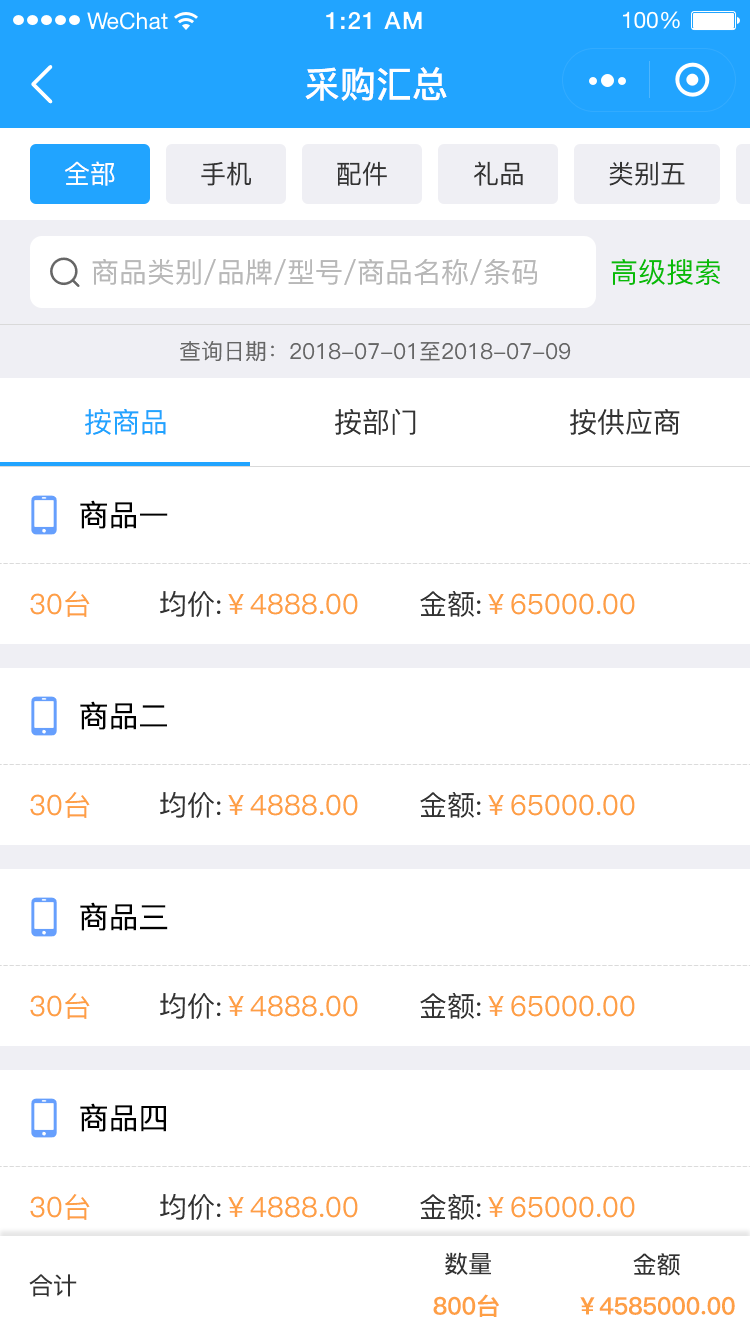
<style>
.page{position:relative;width:750px;height:1334px;background:#ffffff}
.page>*{position:absolute;margin:0}
.t1{font:36px "PingFang-SC-Bold";color:#ffffff}
.t2{font:26px "PingFang-SC-Medium";color:#ffffff}
.t3{font:26px "PingFang-SC-Medium";color:#333333}
.t4{font:28px "PingFang-SC-Medium";color:#b8b8b8}
.t5{font:28px "PingFang-SC-Medium";color:#09bb07}
.t6{font:22px "PingFang-SC-Medium";color:#666666}
.t7{font:28px "PingFang-SC-Medium";color:#21a4ff}
.t8{font:28px "PingFang-SC-Medium";color:#333333}
.t9{font:30px "PingFang-SC-Medium";color:#000000}
.t10{font:28px "PingFang-SC-Medium";color:#fe9f45}
.t11{font:24px "PingFang-SC-Medium";color:#333333}
.t12{font:24px "PingFang-SC-Bold";color:#fe9f45}
</style>
<div class="page">
<p class="t1" style="left:305px;top:67px;width:142px;height:34px">采购汇总</p>
<p class="t2" style="left:65px;top:161px;width:50px;height:25px">全部</p>
<p class="t3" style="left:201px;top:161px;width:50px;height:25px">手机</p>
<p class="t3" style="left:337px;top:161px;width:50px;height:25px">配件</p>
<p class="t3" style="left:474px;top:161px;width:49px;height:25px">礼品</p>
<p class="t3" style="left:609px;top:161px;width:76px;height:25px">类别五</p>
<p class="t4" style="left:92px;top:258px;width:445px;height:27px">商品类别/品牌/型号/商品名称/条码</p>
<p class="t5" style="left:611px;top:259px;width:109px;height:26px">高级搜索</p>
<p class="t6" style="left:180px;top:341px;width:391px;height:21px">查询日期：2018-07-01至2018-07-09</p>
<p class="t7" style="left:85px;top:409px;width:81px;height:26px">按商品</p>
<p class="t8" style="left:335px;top:409px;width:81px;height:26px">按部门</p>
<p class="t8" style="left:570px;top:409px;width:110px;height:26px">按供应商</p>
<p class="t9" style="left:80px;top:500px;width:88px;height:29px">商品一</p>
<p class="t10" style="left:30px;top:591px;width:60px;height:26px">30台</p>
<p class="t10" style="left:160px;top:591px;width:198px;height:26px"><span class="t8">均价:</span>￥4888.00</p>
<p class="t10" style="left:420px;top:591px;width:215px;height:26px"><span class="t8">金额:</span>￥65000.00</p>
<p class="t9" style="left:80px;top:701px;width:87px;height:29px">商品二</p>
<p class="t10" style="left:30px;top:792px;width:60px;height:26px">30台</p>
<p class="t10" style="left:160px;top:792px;width:198px;height:26px"><span class="t8">均价:</span>￥4888.00</p>
<p class="t10" style="left:420px;top:792px;width:215px;height:26px"><span class="t8">金额:</span>￥65000.00</p>
<p class="t9" style="left:80px;top:902px;width:88px;height:29px">商品三</p>
<p class="t10" style="left:30px;top:993px;width:60px;height:26px">30台</p>
<p class="t10" style="left:160px;top:993px;width:198px;height:26px"><span class="t8">均价:</span>￥4888.00</p>
<p class="t10" style="left:420px;top:993px;width:215px;height:26px"><span class="t8">金额:</span>￥65000.00</p>
<p class="t9" style="left:80px;top:1103px;width:86px;height:29px">商品四</p>
<p class="t10" style="left:30px;top:1194px;width:60px;height:26px">30台</p>
<p class="t10" style="left:160px;top:1194px;width:198px;height:26px"><span class="t8">均价:</span>￥4888.00</p>
<p class="t10" style="left:420px;top:1194px;width:215px;height:26px"><span class="t8">金额:</span>￥65000.00</p>
<p class="t11" style="left:445px;top:1252px;width:46px;height:23px">数量</p>
<p class="t11" style="left:633px;top:1253px;width:47px;height:23px">金额</p>
<p class="t11" style="left:29px;top:1274px;width:48px;height:23px">合计</p>
<p class="t12" style="left:433px;top:1294px;width:66px;height:23px">800台</p>
<p class="t12" style="left:580px;top:1296px;width:155px;height:19px">￥4585000.00</p>
</div>
